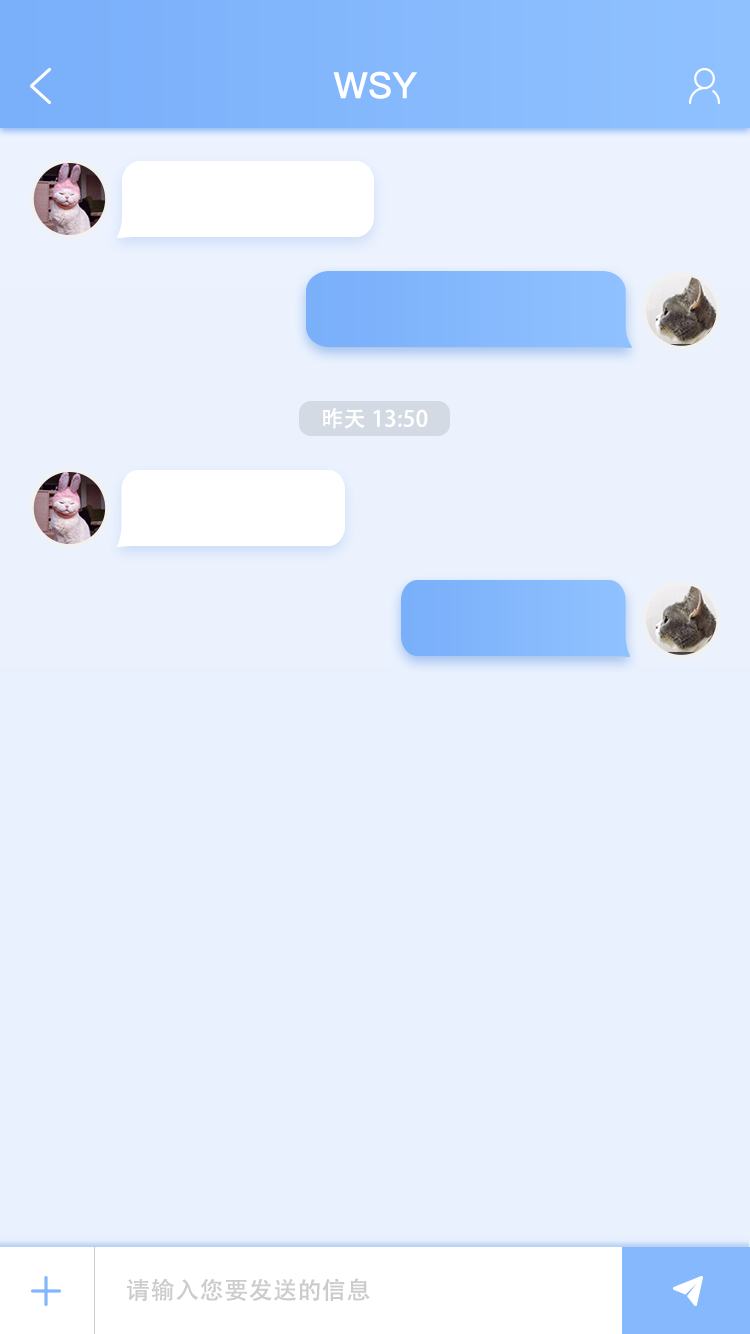
<style>
.page{position:relative;width:750px;height:1334px;background:#eaf1fe}
.page>*{position:absolute;margin:0}
.t1{font:36px "PingFangSC-Medium";letter-spacing:0.02em;color:#ffffff}
.t2{font:22px "AdobeHeitiStd-Regular";letter-spacing:0.02em;color:#ffffff}
.t3{font:24px "AdobeHeitiStd-Regular";letter-spacing:0.02em;color:#cccccc}
</style>
<div class="page">
<p class="t1" style="left:333px;top:71px;width:84px;height:28px">WSY</p>
<p class="t2" style="left:323px;top:408px;width:105px;height:21px">昨天 13:50</p>
<p class="t3" style="left:127px;top:1278px;width:243px;height:23px">请输入您要发送的信息</p>
</div>
